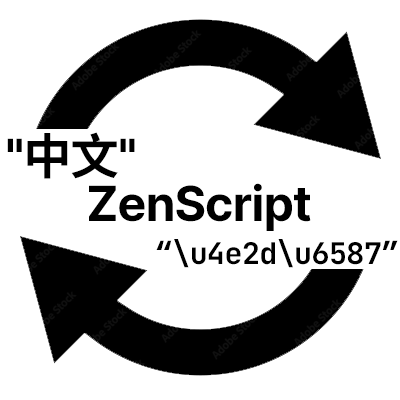
<style>
.page{position:relative;width:400px;height:400px;background:#ffffff}
.page>*{position:absolute;margin:0}
.t1{font:48.3px "Sarasa-Gothic-SC-Bold";letter-spacing:-0.02em;color:#000000}
.t2{font:30px "JetBrainsMono-Bold";letter-spacing:-0.02em;color:#000000}
</style>
<div class="page">
<p class="t1" style="left:7px;top:132px;width:128px;height:47px">"中文"</p>
<p class="t1" style="left:89px;top:183px;width:222px;height:48px">ZenScript</p>
<p class="t2" style="left:156px;top:239px;width:242px;height:29px">“\u4e2d\u6587”</p>
</div>
